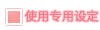
<style>
.page{position:relative;width:100px;height:30px;background:#ffffff}
.page>*{position:absolute;margin:0}
.t1{font:12px "SourceHanSansSC-Regular";color:#f97887;font-weight:bold}
</style>
<div class="page">
<p class="t1" style="left:25px;top:10px;width:74px;height:12px">使用专用设定</p>
</div>
